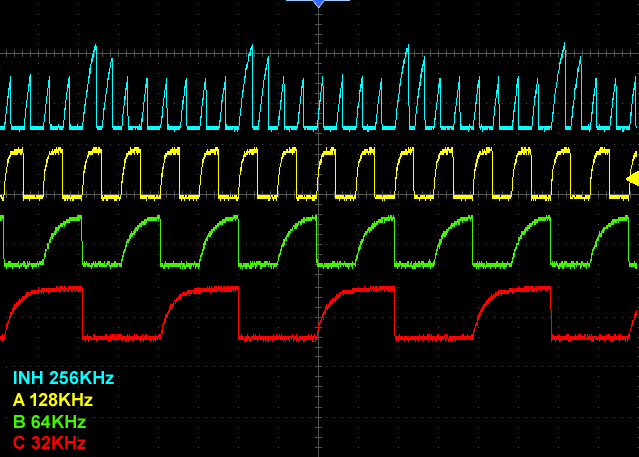
<style>
.page{position:relative;width:639px;height:457px;background:#000000}
.page>*{position:absolute;margin:0}
.t1{font:18px "Arial-BoldMT";color:#00ffff}
.t2{font:18px "Arial-BoldMT";color:#ffff00}
.t3{font:18px "Arial-BoldMT";color:#44f300}
.t4{font:18px "Arial-BoldMT";color:#ff0000}
</style>
<div class="page">
<p class="t1" style="left:12px;top:371px;width:102px;height:79px">INH 256KHz<br><span class="t2">A 128KHz<br></span><span class="t3">B 64KHz<br></span><span class="t4">C 32KHz</span></p>
</div>
